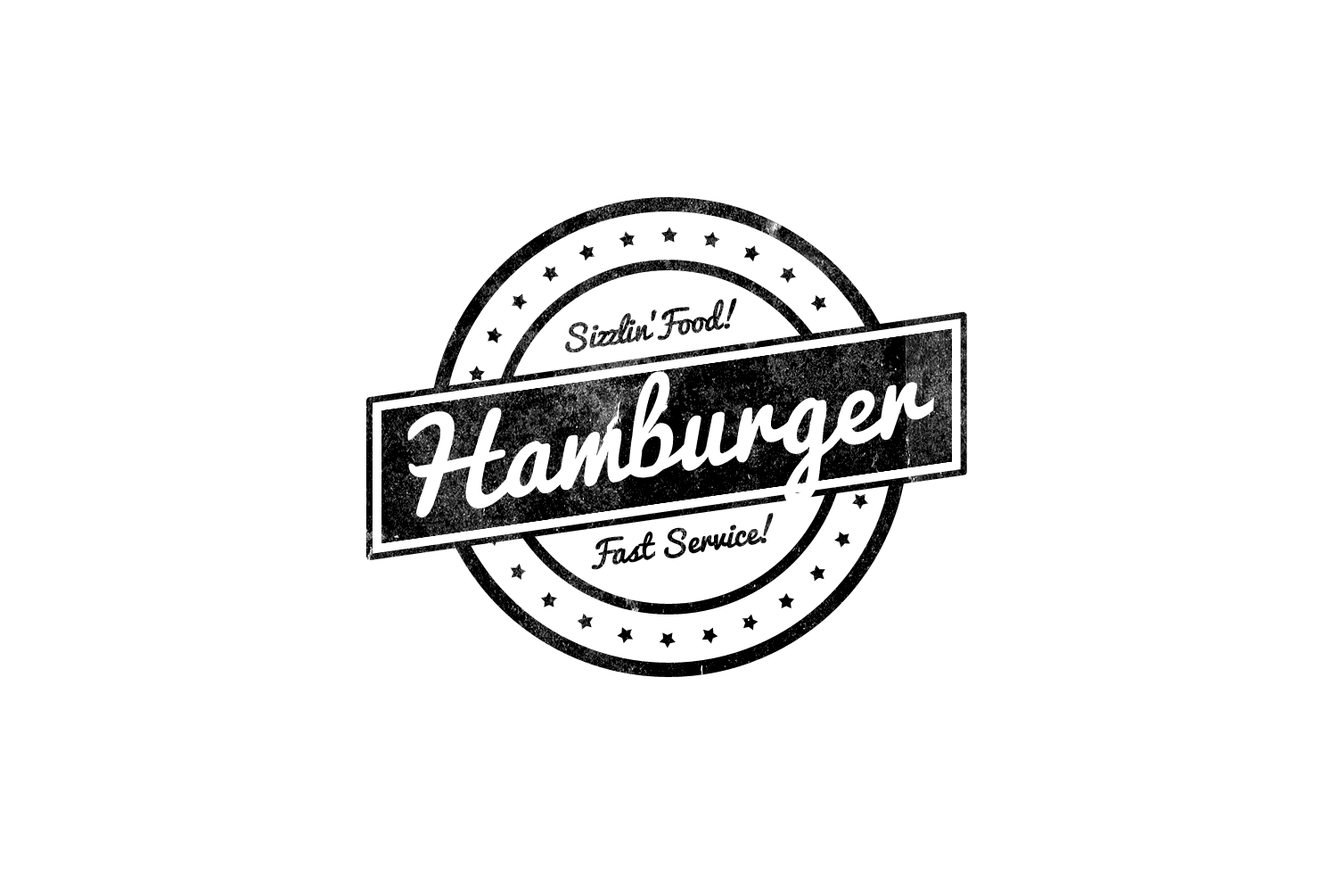
<style>
.page{position:relative;width:1337px;height:892px;background:#ffffff}
.page>*{position:absolute;margin:0}
.t1{font:31.9px "Pacifico"}
.t2{font:110.6px "Pacifico";color:#ffffff}
.t3{font:31.9px "Pacifico";color:#000000}
</style>
<div class="page">
<p class="t1" style="left:565px;top:298px;width:172px;height:55px;rotate:-8deg">Sizzlin’ Food!</p>
<p class="t2" style="left:407px;top:371px;width:527px;height:146px;rotate:-9deg">Hamburger</p>
<p class="t3" style="left:591px;top:513px;width:183px;height:57px;rotate:-8deg">Fast Service!</p>
</div>
